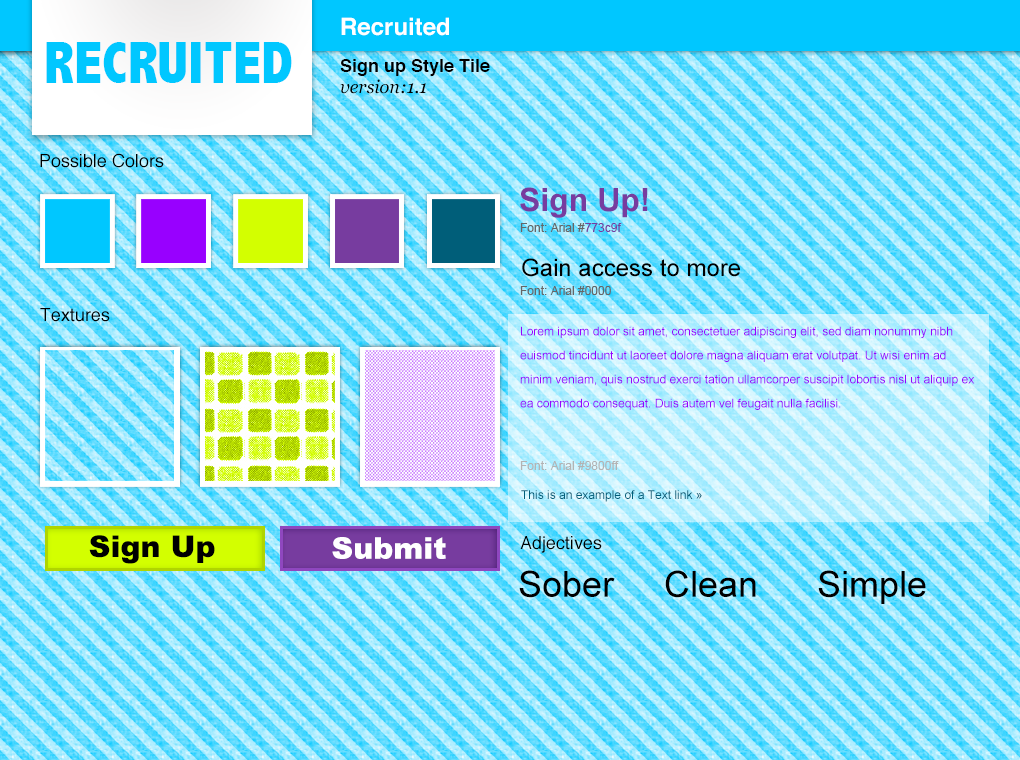
<style>
.page{position:relative;width:1020px;height:760px}
.page>*{position:absolute;margin:0}
.t1{font:24px "Helvetica-Bold";color:#ffffff}
.t2{font:60px "AbadiMT-CondensedExtraBold";color:#00c7ff}
.t3{font:18px "Helvetica-Bold";color:#000000}
.t4{font:18px "Georgia-Italic";color:#000000}
.t5{font:18px "Helvetica";color:#000000}
.t6{font:32px "Arial-BoldMT";color:#773c9f}
.t7{font:12px "ArialMT";color:#666666}
.t8{font:12px "ArialMT";color:#773c9f}
.t9{font:24px "ArialMT";color:#000000}
.t10{font:12px/24px "ArialMT";color:#9800ff}
.t11{font:12px "ArialMT";color:#b3b3b3}
.t12{font:12px "ArialMT";color:#005e79}
.t13{font:30px "Arial-Black";color:#000000}
.t14{font:30px "Arial-Black";color:#ffffff}
.t15{font:36px "ArialMT";color:#000000}
</style>
<div class="page">
<p class="t1" style="left:341px;top:17px;width:108px;height:19px">Recruited</p>
<p class="t2" style="left:46px;top:42px;width:246px;height:41px">RECRUITED</p>
<p class="t3" style="left:340px;top:59px;width:150px;height:17px">Sign up Style Tile</p>
<p class="t4" style="left:340px;top:79px;width:86px;height:15px">version:1.1</p>
<p class="t5" style="left:40px;top:153px;width:124px;height:15px">Possible Colors</p>
<p class="t6" style="left:520px;top:187px;width:128px;height:31px">Sign Up!</p>
<p class="t7" style="left:520px;top:223px;width:102px;height:9px">Font: Arial #<span class="t8">773c9f</span></p>
<p class="t9" style="left:522px;top:258px;width:218px;height:19px">Gain access to more</p>
<p class="t7" style="left:520px;top:286px;width:91px;height:9px">Font: Arial #0000</p>
<p class="t5" style="left:40px;top:308px;width:70px;height:14px">Textures</p>
<p class="t10" style="left:520px;top:326px;width:455px;height:84px">Lorem ipsum dolor sit amet, consectetuer adipiscing elit, sed diam nonummy nibh euismod tincidunt ut laoreet dolore magna aliquam erat volutpat. Ut wisi enim ad minim veniam, quis nostrud exerci tation ullamcorper suscipit lobortis nisl ut aliquip ex ea commodo consequat. Duis autem vel feugait nulla facilisi.</p>
<p class="t11" style="left:520px;top:461px;width:99px;height:9px">Font: Arial #9800ff</p>
<p class="t12" style="left:521px;top:490px;width:181px;height:12px">This is an example of a Text link »</p>
<p class="t13" style="left:89px;top:535px;width:126px;height:29px">Sign Up</p>
<p class="t14" style="left:332px;top:537px;width:114px;height:22px">Submit</p>
<p class="t5" style="left:520px;top:536px;width:82px;height:17px">Adjectives</p>
<p class="t15" style="left:519px;top:570px;width:96px;height:28px">Sober</p>
<p class="t15" style="left:665px;top:570px;width:91px;height:28px">Clean</p>
<p class="t15" style="left:818px;top:570px;width:108px;height:34px">Simple</p>
</div>
